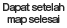
<style>
.page{position:relative;width:67px;height:28px;background:#ffffff}
.page>*{position:absolute;margin:0}
.t1{font:10px/12px "GothicMB101Pro-Medium";letter-spacing:-0.07em;color:#2a2a2a;scale:0.9 1}
</style>
<div class="page">
<p class="t1" style="left:3px;top:3px;width:62px;height:22px;text-align:center">Dapat setelah<br>map selesai</p>
</div>
